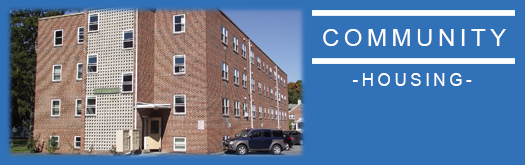
<style>
.page{position:relative;width:525px;height:165px;background:#3171b8}
.page>*{position:absolute;margin:0}
.t1{font:24.2px "ArialMT";letter-spacing:0.19em;color:#ffffff}
.t2{font:18px "ArialMT";letter-spacing:0.19em;color:#ffffff;scale:0.97 1}
</style>
<div class="page">
<p class="t1" style="left:323px;top:29px;width:183px;height:17px">COMMUNITY</p>
<p class="t2" style="left:352px;top:73px;width:120px;height:13px">-HOUSING-</p>
</div>
